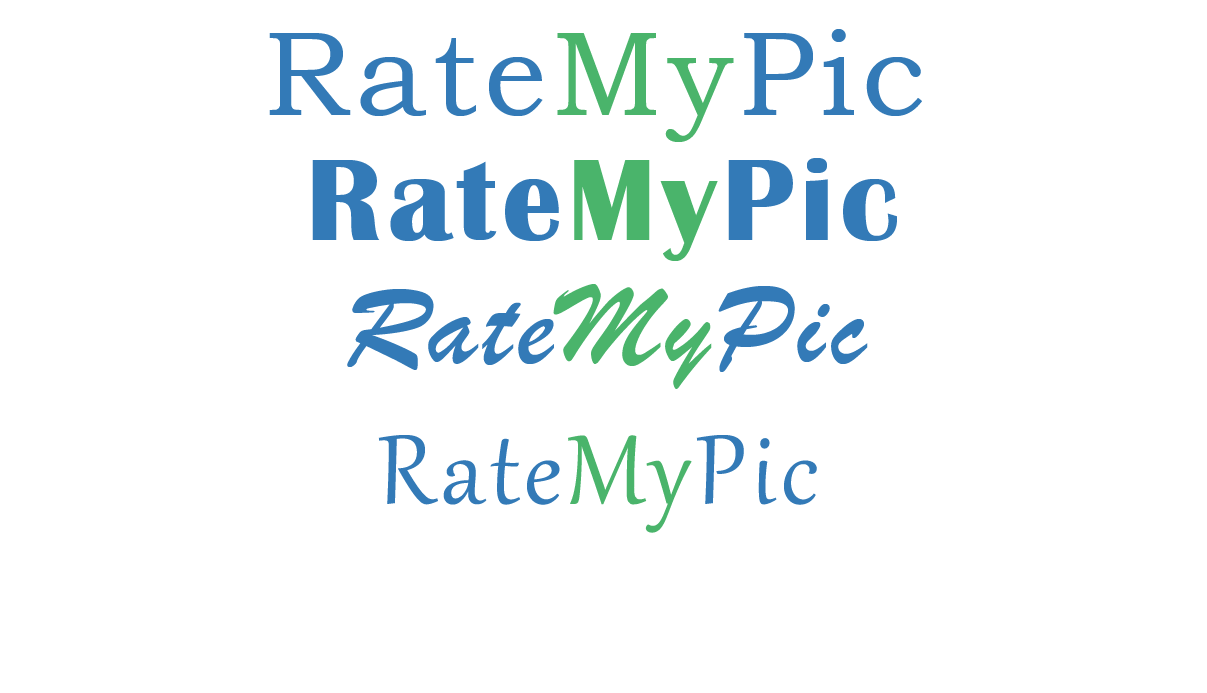
<style>
.page{position:relative;width:1207px;height:693px;background:#ffffff}
.page>*{position:absolute;margin:0}
.t1{font:120px "BookmanOldStyle";letter-spacing:0.05em;color:#337ab7}
.t2{font:120px "BookmanOldStyle";letter-spacing:0.05em;color:#4ab46b}
.t3{font:120px "BritannicBold";letter-spacing:0.05em;color:#337ab7}
.t4{font:120px "BritannicBold";letter-spacing:0.05em;color:#4ab46b}
.t5{font:120px "BrushScriptMT";letter-spacing:0.05em;color:#337ab7}
.t6{font:120px "BrushScriptMT";letter-spacing:0.05em;color:#4ab46b}
.t7{font:120px "Gabriola";letter-spacing:0.05em;color:#337ab7}
.t8{font:120px "Gabriola";letter-spacing:0.05em;color:#4ab46b}
</style>
<div class="page">
<p class="t1" style="left:269px;top:29px;width:653px;height:113px">Rate<span class="t2">My</span>Pic</p>
<p class="t3" style="left:312px;top:158px;width:585px;height:103px">Rate<span class="t4">My</span>Pic</p>
<p class="t5" style="left:347px;top:284px;width:521px;height:105px">Rate<span class="t6">My</span>Pic</p>
<p class="t7" style="left:378px;top:435px;width:439px;height:98px">Rate<span class="t8">My</span>Pic</p>
</div>
